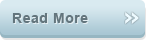
<style>
.page{position:relative;width:146px;height:40px}
.page>*{position:absolute;margin:0}
.t1{font:14px "Arial-BoldMT";letter-spacing:0.04em;color:#63757d}
.t2{font:24px "Tahoma-Bold";color:#edfaff}
</style>
<div class="page">
<p class="t1" style="left:12px;top:13px;width:76px;height:10px">Read More</p>
<p class="t2" style="left:125px;top:12px;width:14px;height:12px">»</p>
</div>
